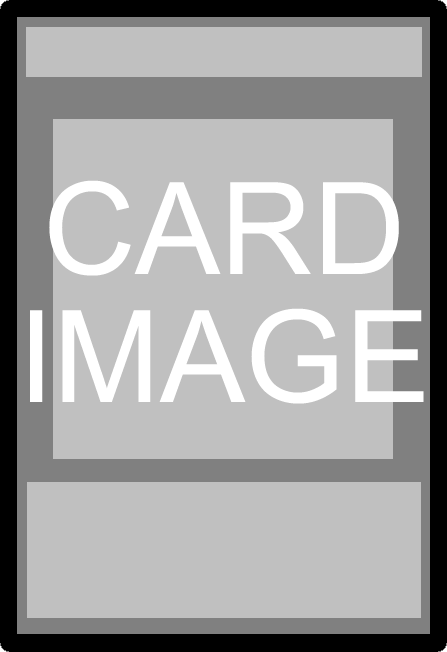
<style>
.page{position:relative;width:447px;height:652px;background:#c0c0c0}
.page>*{position:absolute;margin:0}
.t1{font:128px/128px "ArialMT";color:#ffffff}
</style>
<div class="page">
<p class="t1" style="left:30px;top:180px;width:394px;height:224px;text-align:center">CARD<br>IMAGE</p>
</div>
